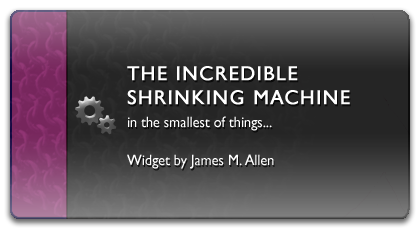
<style>
.page{position:relative;width:420px;height:230px}
.page>*{position:absolute;margin:0}
.t1{font:20px "GillSansMT";letter-spacing:0.05em;color:#ffffff;font-weight:bold}
.t2{font:15px "GillSansMT";color:#ffffff;scale:0.95 1}
</style>
<div class="page">
<p class="t1" style="left:127px;top:66px;width:223px;height:39px">THE INCREDIBLE<br>SHRINKING MACHINE</p>
<p class="t2" style="left:128px;top:116px;width:144px;height:15px">in the smallest of things...</p>
<p class="t2" style="left:127px;top:154px;width:147px;height:15px">Widget by James M. Allen</p>
</div>
